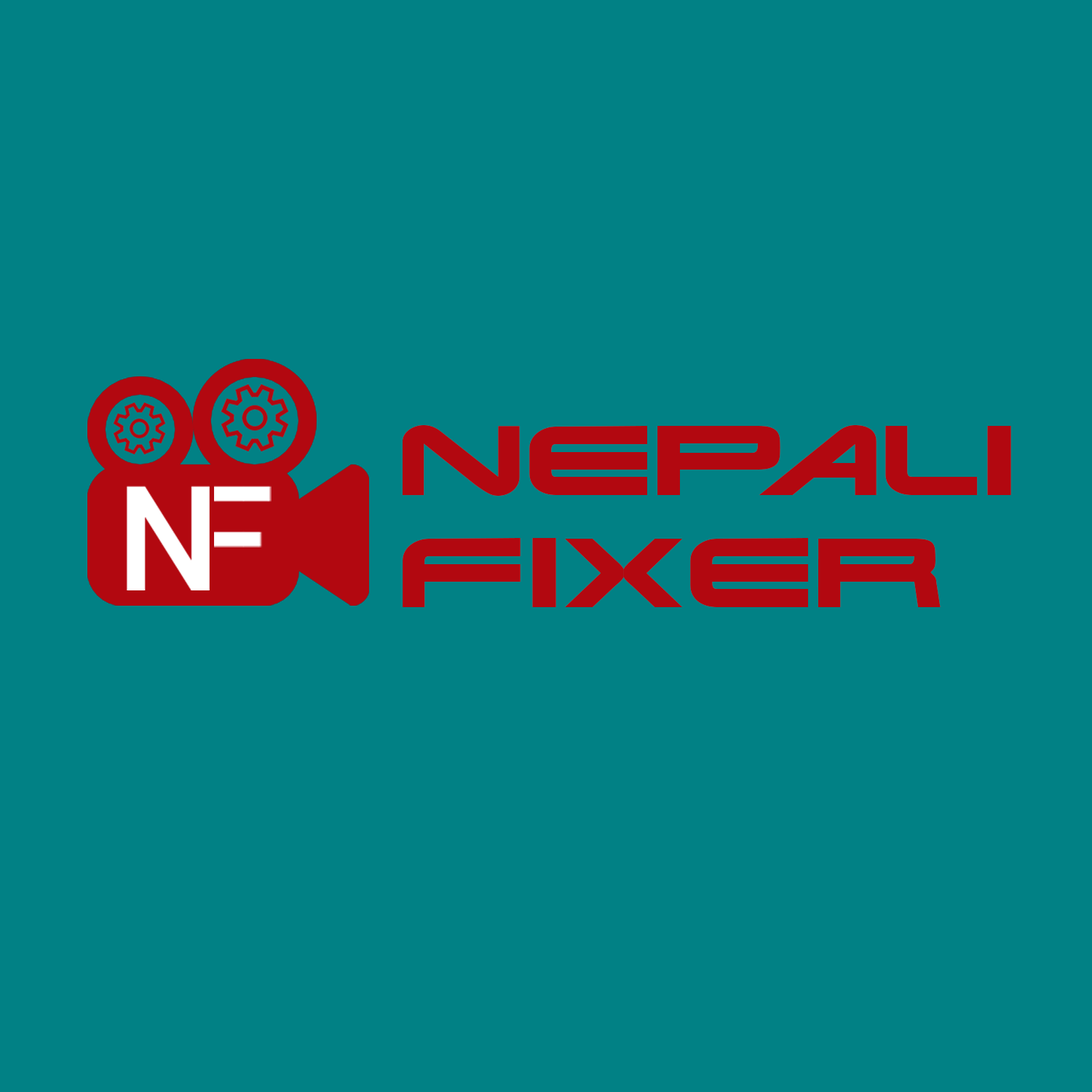
<style>
.page{position:relative;width:1092px;height:1092px;background:#018185}
.page>*{position:absolute;margin:0}
.t1{font:22.4px "TerminatorRealNFI";color:#b20810;scale:1.21 1}
</style>
<div class="page">
<p class="t1" style="left:402px;top:425px;width:609px;height:182px">Nepali<br>FiXER</p>
</div>
